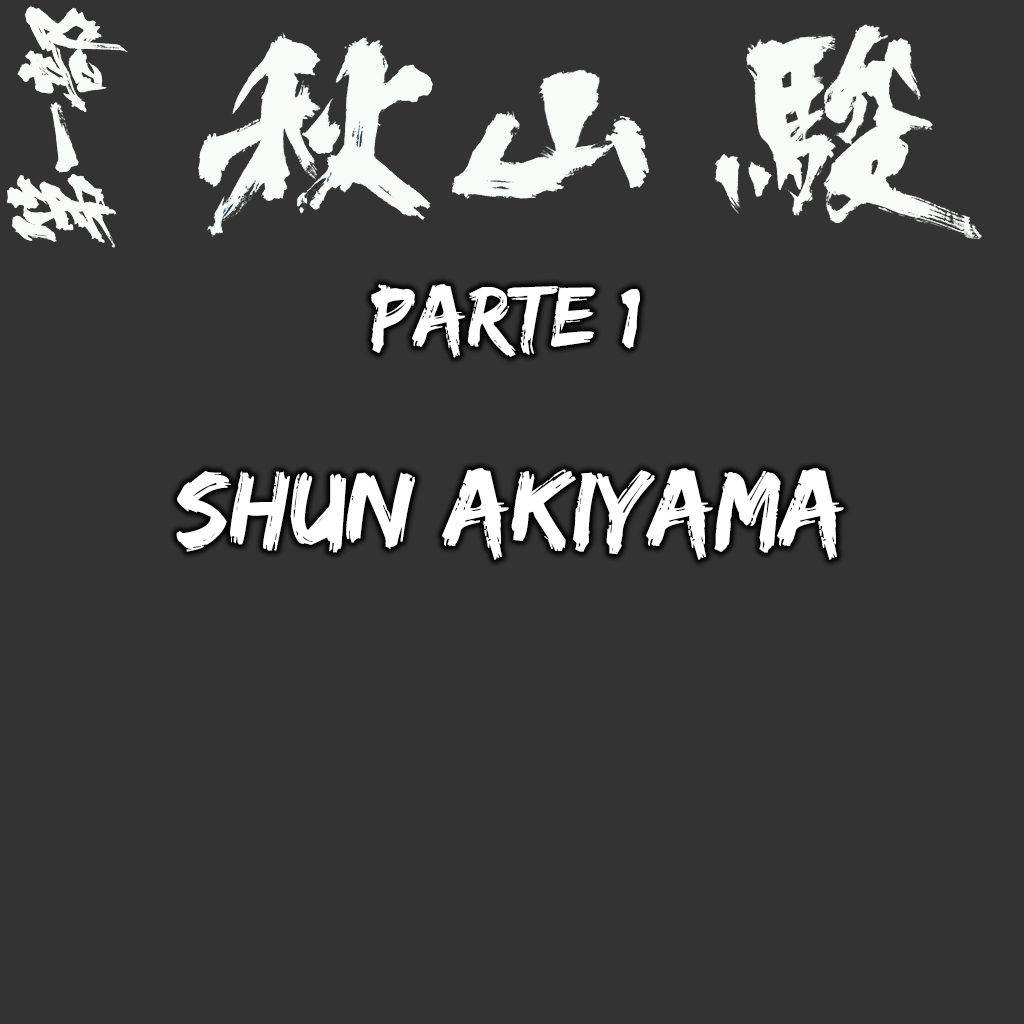
<style>
.page{position:relative;width:1024px;height:1024px;background:#333333}
.page>*{position:absolute;margin:0}
.t1{font:88.5px "EdoSZ";color:#ffffff}
.t2{font:109.9px "EdoSZ";color:#ffffff}
</style>
<div class="page">
<p class="t1" style="left:371px;top:284px;width:269px;height:74px">parte 1</p>
<p class="t2" style="left:176px;top:468px;width:668px;height:92px">shun akiyama</p>
</div>
